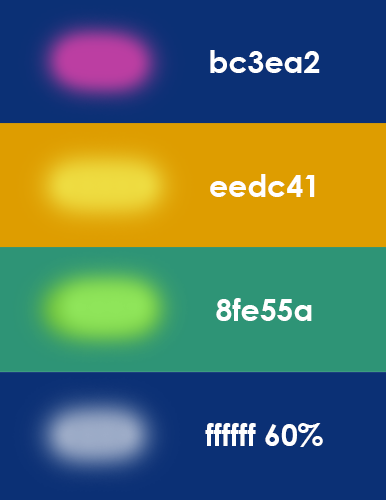
<style>
.page{position:relative;width:386px;height:500px;background:#0b3075}
.page>*{position:absolute;margin:0}
.t1{font:30px "CenturyGothic-Bold";color:#ffffff}
</style>
<div class="page">
<p class="t1" style="left:210px;top:50px;width:110px;height:23px">bc3ea2</p>
<p class="t1" style="left:210px;top:174px;width:105px;height:23px">eedc41</p>
<p class="t1" style="left:216px;top:298px;width:96px;height:23px">8fe55a</p>
<p class="t1" style="left:205px;top:423px;width:118px;height:24px">ffffff 60%</p>
</div>
